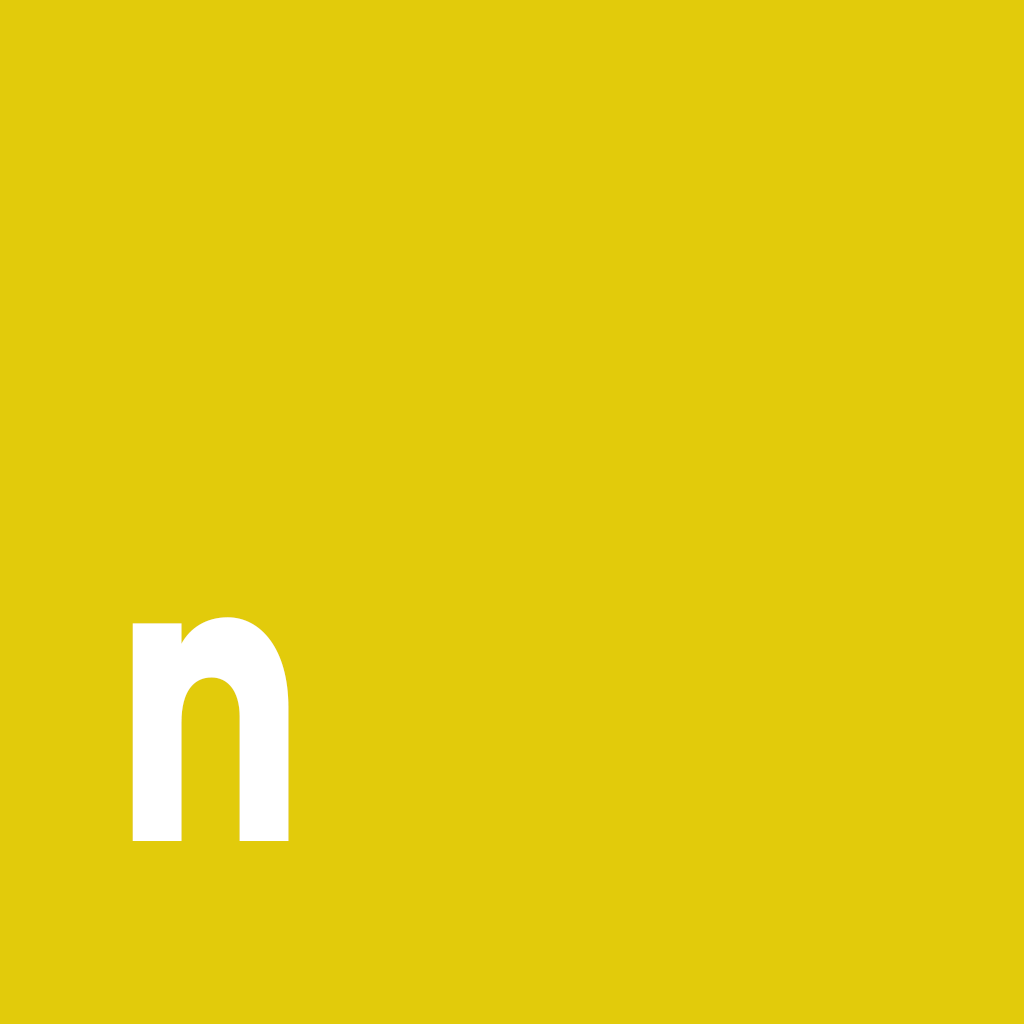
<style>
.page{position:relative;width:1024px;height:1024px;background:#e2cb0b}
.page>*{position:absolute;margin:0}
.t1{font:435.1px "Gilroy-ExtraBold";color:#ffffff;scale:0.74 1}
</style>
<div class="page">
<p class="t1" style="left:132px;top:617px;width:157px;height:224px">n</p>
</div>
